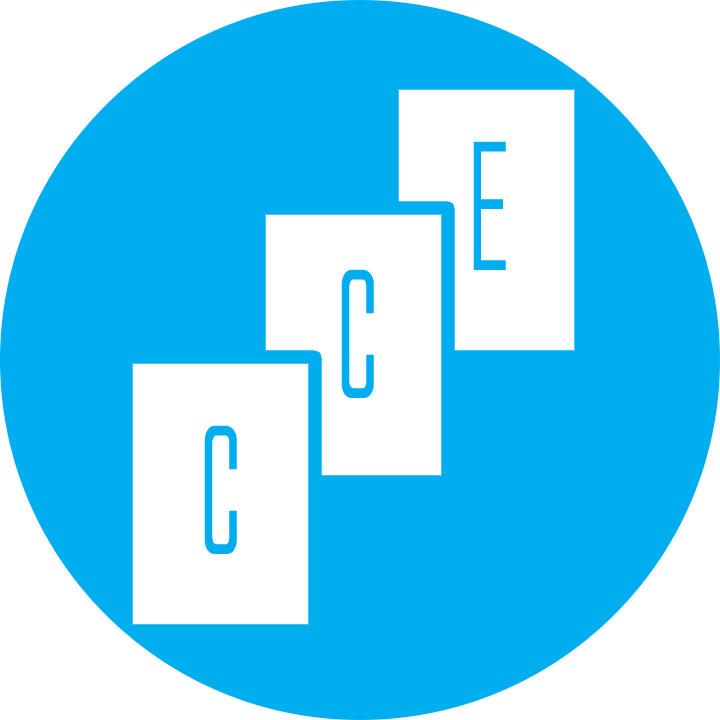
<style>
.page{position:relative;width:720px;height:720px;background:#00aeef}
.page>*{position:absolute;margin:0}
.t1{font:170px "AlienLeagueBold";color:#00aeef;scale:0.85 1}
</style>
<div class="page">
<p class="t1" style="left:473px;top:141px;width:33px;height:129px">E</p>
<p class="t1" style="left:341px;top:269px;width:33px;height:129px">c</p>
<p class="t1" style="left:204px;top:425px;width:33px;height:129px">c</p>
</div>
